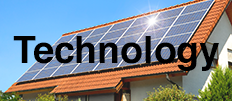
<style>
.page{position:relative;width:232px;height:101px}
.page>*{position:absolute;margin:0}
.t1{font:37.5px "Helvetica-Bold";color:#000000}
</style>
<div class="page">
<p class="t1" style="left:13px;top:36px;width:206px;height:35px">Technology</p>
</div>
